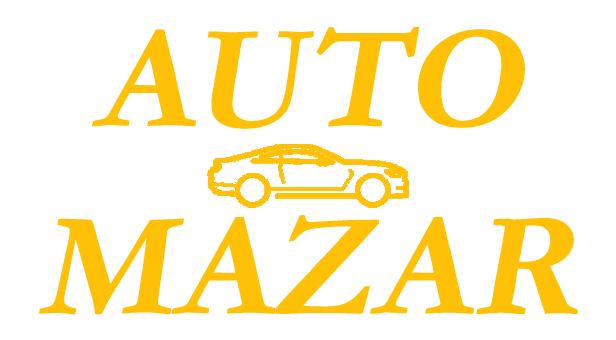
<style>
.page{position:relative;width:616px;height:340px;background:#ffffff}
.page>*{position:absolute;margin:0}
.t1{font:150px "Garamond-Bold";color:#ffc107;font-style:italic}
</style>
<div class="page">
<p class="t1" style="left:92px;top:27px;width:433px;height:102px">AUTO</p>
<p class="t1" style="left:38px;top:215px;width:540px;height:100px">MAZAR</p>
</div>
